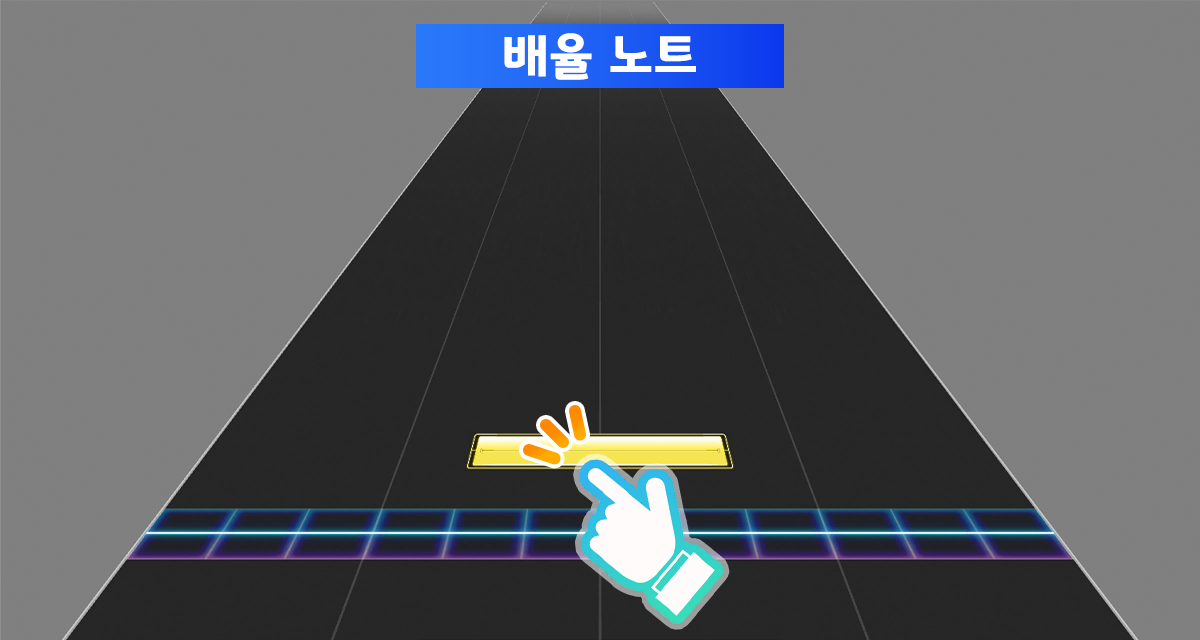
<style>
.page{position:relative;width:1200px;height:640px;background:#808080}
.page>*{position:absolute;margin:0}
.t1{font:50.7px "GyeonggiTitleB";letter-spacing:0.03em;color:#ffffff}
</style>
<div class="page">
<p class="t1" style="left:504px;top:33px;width:192px;height:47px">배율 노트</p>
</div>
